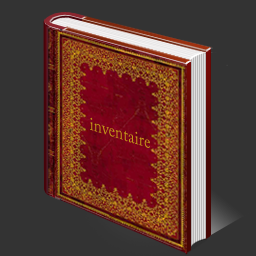
<style>
.page{position:relative;width:256px;height:256px;background:#333333}
.page>*{position:absolute;margin:0}
.t1{font:18.8px "ACaslonPro-Regular";color:#c29818;scale:0.86 1}
</style>
<div class="page">
<p class="t1" style="left:90px;top:117px;width:60px;height:31px;rotate:17deg">inventaire</p>
</div>
